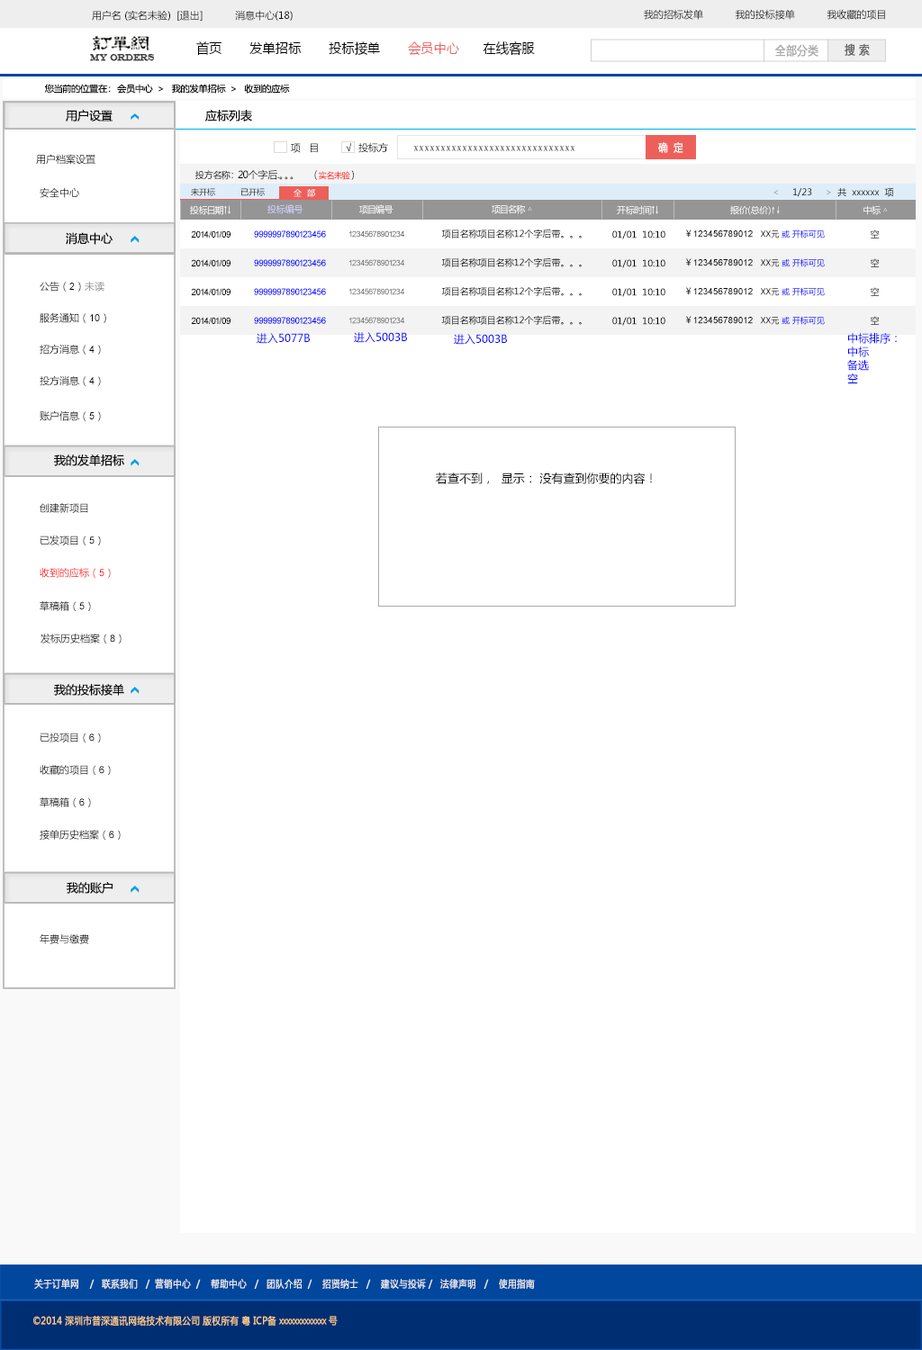
<style>
.page{position:relative;width:922px;height:1350px;background:#ffffff}
.page>*{position:absolute;margin:0}
.t1{font:9.9px "MicrosoftYaHei";color:#000000}
.t2{font:13.9px "MicrosoftYaHei";color:#000000;font-variant:small-caps;scale:0.94 1}
.t3{font:13.9px "MicrosoftYaHei";color:#ed6059;font-variant:small-caps;scale:0.94 1}
.t4{font:8.9px "EngraversMT";color:#434343;font-variant:small-caps;font-weight:bold;scale:0.86 1}
.t5{font:11.9px "MicrosoftYaHei";color:#aaaaaa;font-variant:small-caps;font-weight:bold;scale:0.86 1}
.t6{font:11.9px "MicrosoftYaHei";color:#626262;font-variant:small-caps;font-weight:bold;scale:0.86 1}
.t7{font:9px "MicrosoftYaHei";color:#060606}
.t8{font:11.7px "MicrosoftYaHei";color:#060606}
.t9{font:10.8px "KaiTi_GB2312"}
.t10{font:10.9px "MicrosoftYaHei";color:#ffffff;font-variant:small-caps;font-weight:bold;scale:0.86 1}
.t11{font:9.9px "MicrosoftYaHei";color:#060606}
.t12{font:9px "MicrosoftYaHei";color:#000000}
.t13{font:8.1px "MicrosoftYaHei";color:#000000}
.t14{font:9.9px "MicrosoftYaHei"}
.t15{font:8.2px "MicrosoftYaHei";color:#000000}
.t16{font:8.2px "MicrosoftYaHei"}
.t17{font:8.2px "MicrosoftYaHei";color:#ffffff}
.t18{font:9px "MicrosoftYaHei";color:#ffffff}
.t19{font:9px "MicrosoftYaHei";color:#d1d2ff}
.t20{font:9px "SimSun";color:#ffffff}
.t21{font:9px "ArialMT";color:#020202}
.t22{font:9px "ArialMT";color:#0000ff}
.t23{font:8.1px "ArialMT";color:#535353}
.t24{font:9px "ArialMT";color:#000000}
.t25{font:9px "MicrosoftYaHei"}
.t26{font:8.1px "ArialMT";color:#626262}
.t27{font:9.9px "ArialMT";color:#060606}
.t28{font:9.9px "MicrosoftYaHei";color:#888584}
.t29{font:10.8px "MicrosoftYaHei";color:#0000ff}
.t30{font:10.8px/13.5px "MicrosoftYaHei";color:#0000ff}
.t31{font:11.7px "MicrosoftYaHei";color:#000000}
.t32{font:9.9px "ArialMT";color:#000000}
.t33{font:9.9px "MicrosoftYaHei";color:#ff0000}
.t34{font:9.9px "ArialMT";color:#ff0000}
.t35{font:9.9px "MicrosoftYaHei";color:#eeeeee;font-variant:small-caps;font-weight:bold;scale:0.86 1}
.t36{font:13.9px "STXihei";color:#eeeeee;font-variant:small-caps;font-weight:bold;scale:0.86 1}
.t37{font:9.9px "MicrosoftYaHei";color:#facd89;font-variant:small-caps;font-weight:bold;scale:0.87 1}
.t38{font:9.9px "MicrosoftYaHei";color:#eeeeee;font-variant:small-caps;font-weight:bold;scale:0.87 1}
</style>
<div class="page">
<p class="t1" style="left:92px;top:10px;width:200px;height:11px">用户名 (实名未验)  [退出]           消息中心(18)</p>
<p class="t1" style="left:644px;top:9px;width:241px;height:11px">我的招标发单           我的投标接单           我收藏的项目</p>
<p class="t2" style="left:196px;top:41px;width:339px;height:15px">首页       发单招标       投标接单       <span class="t3">会员中心</span>      在线客服</p>
<p class="t4" style="left:90px;top:54px;width:65px;height:7px">MY ORDERS</p>
<p class="t5" style="left:775px;top:44px;width:43px;height:13px">全部分类</p>
<p class="t6" style="left:844px;top:43px;width:25px;height:13px">搜 索</p>
<p class="t7" style="left:44px;top:84px;width:246px;height:10px">您当前的位置在：  会员中心  &gt;   我的发单招标  &gt;   收到的应标</p>
<p class="t8" style="left:66px;top:110px;width:46px;height:12px">用户设置</p>
<p class="t8" style="left:205px;top:110px;width:47px;height:12px">应标列表</p>
<p class="t1" style="left:291px;top:142px;width:97px;height:11px">项   目         √  投标方</p>
<p class="t9" style="left:413px;top:146px;width:162px;height:5px">xxxxxxxxxxxxxxxxxxxxxxxxxxxxxx</p>
<p class="t10" style="left:658px;top:142px;width:25px;height:11px">确  定</p>
<p class="t11" style="left:36px;top:154px;width:59px;height:11px">用户档案设置</p>
<p class="t1" style="left:195px;top:169px;width:159px;height:11px"><span class="t12">投方名称</span>： 20个字后.。。。      （<span class="t13">实名未验</span>）</p>
<p class="t14" style="left:40px;top:187px;width:39px;height:11px">安全中心</p>
<p class="t15" style="left:191px;top:188px;width:24px;height:8px">未开标</p>
<p class="t16" style="left:240px;top:188px;width:25px;height:8px">已开标</p>
<p class="t17" style="left:293px;top:189px;width:22px;height:8px">全  部</p>
<p class="t7" style="left:773px;top:188px;width:121px;height:9px">&lt;     1/23     &gt;  共  xxxxxx  项</p>
<p class="t18" style="left:190px;top:205px;width:41px;height:10px">投标日期↑↓</p>
<p class="t19" style="left:267px;top:204px;width:36px;height:10px">投标编号</p>
<p class="t18" style="left:359px;top:204px;width:34px;height:10px">项目编号</p>
<p class="t18" style="left:491px;top:204px;width:41px;height:10px">项目名称 △</p>
<p class="t18" style="left:616px;top:205px;width:43px;height:10px">开标时间↑↓</p>
<p class="t18" style="left:730px;top:205px;width:49px;height:10px">报价(总价)<span class="t20">↑↓</span></p>
<p class="t18" style="left:863px;top:205px;width:24px;height:10px">中标 △</p>
<p class="t8" style="left:66px;top:232px;width:46px;height:13px">消息中心</p>
<p class="t21" style="left:191px;top:230px;width:39px;height:8px">2014/01/09</p>
<p class="t22" style="left:254px;top:230px;width:72px;height:8px">9999997890123456</p>
<p class="t23" style="left:349px;top:230px;width:55px;height:8px">12345678901234</p>
<p class="t12" style="left:441px;top:229px;width:140px;height:9px">项目名称项目名称12个字后带。。。</p>
<p class="t12" style="left:612px;top:230px;width:53px;height:9px">01/01  10:10</p>
<p class="t24" style="left:686px;top:230px;width:138px;height:8px"><span class="t12">￥</span>123456789012   <span class="t13">XX元 </span><span class="t13">或 开标可见</span></p>
<p class="t25" style="left:869px;top:230px;width:10px;height:8px">空</p>
<p class="t12" style="left:441px;top:257px;width:140px;height:10px">项目名称项目名称12个字后带。。。</p>
<p class="t21" style="left:191px;top:259px;width:39px;height:7px">2014/01/09</p>
<p class="t22" style="left:254px;top:259px;width:72px;height:7px">9999997890123456</p>
<p class="t26" style="left:349px;top:259px;width:55px;height:7px">12345678901234</p>
<p class="t12" style="left:612px;top:259px;width:53px;height:9px">01/01  10:10</p>
<p class="t24" style="left:686px;top:258px;width:138px;height:9px"><span class="t12">￥</span>123456789012   <span class="t13">XX元 </span><span class="t13">或 开标可见</span></p>
<p class="t25" style="left:869px;top:258px;width:10px;height:9px">空</p>
<p class="t11" style="left:40px;top:281px;width:64px;height:11px">公告（<span class="t27">2</span>）<span class="t28">未读</span></p>
<p class="t21" style="left:191px;top:288px;width:39px;height:7px">2014/01/09</p>
<p class="t22" style="left:254px;top:288px;width:72px;height:7px">9999997890123456</p>
<p class="t26" style="left:349px;top:288px;width:55px;height:7px">12345678901234</p>
<p class="t12" style="left:441px;top:286px;width:140px;height:10px">项目名称项目名称12个字后带。。。</p>
<p class="t12" style="left:612px;top:288px;width:53px;height:9px">01/01  10:10</p>
<p class="t24" style="left:686px;top:287px;width:138px;height:9px"><span class="t12">￥</span>123456789012   <span class="t13">XX元 </span><span class="t13">或 开标可见</span></p>
<p class="t25" style="left:869px;top:287px;width:10px;height:9px">空</p>
<p class="t11" style="left:40px;top:312px;width:66px;height:11px">服务通知（<span class="t27">10</span>）</p>
<p class="t21" style="left:191px;top:317px;width:39px;height:7px">2014/01/09</p>
<p class="t22" style="left:254px;top:317px;width:72px;height:7px">9999997890123456</p>
<p class="t26" style="left:349px;top:317px;width:55px;height:7px">12345678901234</p>
<p class="t12" style="left:441px;top:315px;width:140px;height:10px">项目名称项目名称12个字后带。。。</p>
<p class="t12" style="left:612px;top:317px;width:53px;height:9px">01/01  10:10</p>
<p class="t24" style="left:686px;top:316px;width:138px;height:9px"><span class="t12">￥</span>123456789012   <span class="t13">XX元</span><span class="t13"> 或 开标可见</span></p>
<p class="t25" style="left:869px;top:316px;width:10px;height:9px">空</p>
<p class="t29" style="left:256px;top:333px;width:54px;height:11px">进入5077B</p>
<p class="t29" style="left:354px;top:332px;width:53px;height:11px">进入5003B</p>
<p class="t29" style="left:454px;top:334px;width:53px;height:11px">进入5003B</p>
<p class="t30" style="left:847px;top:333px;width:49px;height:50px">中标排序：<br>中标<br>备选<br>空</p>
<p class="t11" style="left:40px;top:344px;width:61px;height:11px">招方消息（<span class="t27">4</span>）</p>
<p class="t11" style="left:40px;top:375px;width:61px;height:11px">投方消息（<span class="t27">4</span>）</p>
<p class="t11" style="left:40px;top:410px;width:61px;height:11px">账户信息（<span class="t27">5</span>）</p>
<p class="t8" style="left:54px;top:454px;width:70px;height:12px">我的发单招标</p>
<p class="t31" style="left:436px;top:472px;width:216px;height:12px">若查不到，  显示： 没有查到你要的内容！</p>
<p class="t14" style="left:40px;top:503px;width:48px;height:10px">创建新项目</p>
<p class="t1" style="left:40px;top:536px;width:61px;height:9px">已发项目（<span class="t32">5</span>）</p>
<p class="t33" style="left:40px;top:568px;width:71px;height:10px">收到的应标（<span class="t34">5</span>）</p>
<p class="t11" style="left:40px;top:601px;width:51px;height:10px">草稿箱（<span class="t27">5</span>）</p>
<p class="t11" style="left:40px;top:634px;width:82px;height:10px">发标历史档案（<span class="t27">8</span>）</p>
<p class="t8" style="left:54px;top:684px;width:70px;height:12px">我的投标接单</p>
<p class="t11" style="left:40px;top:733px;width:61px;height:9px">已投项目（<span class="t27">6</span>）</p>
<p class="t11" style="left:40px;top:765px;width:71px;height:10px">收藏的项目（<span class="t27">6</span>）</p>
<p class="t11" style="left:40px;top:797px;width:51px;height:10px">草稿箱（<span class="t27">6</span>）</p>
<p class="t11" style="left:40px;top:830px;width:81px;height:10px">接单历史档案（<span class="t27">6</span>）</p>
<p class="t8" style="left:67px;top:882px;width:45px;height:12px">我的账户</p>
<p class="t11" style="left:40px;top:934px;width:49px;height:10px">年费与缴费</p>
<p class="t35" style="left:34px;top:1278px;width:501px;height:11px"><span class="t36"><br><br></span>关于订单网    /   联系我们   /  营销中心  /    帮助中心   /   团队介绍  /    招贤纳士   /    建议与投诉 /   法律声明   /    使用指南</p>
<p class="t37" style="left:33px;top:1316px;width:305px;height:10px"><span class="t38"> </span>©2014 深圳市普深通讯网络技术有限公司 版权所有 粤 ICP备 xxxxxxxxxxxxx 号</p>
</div>
